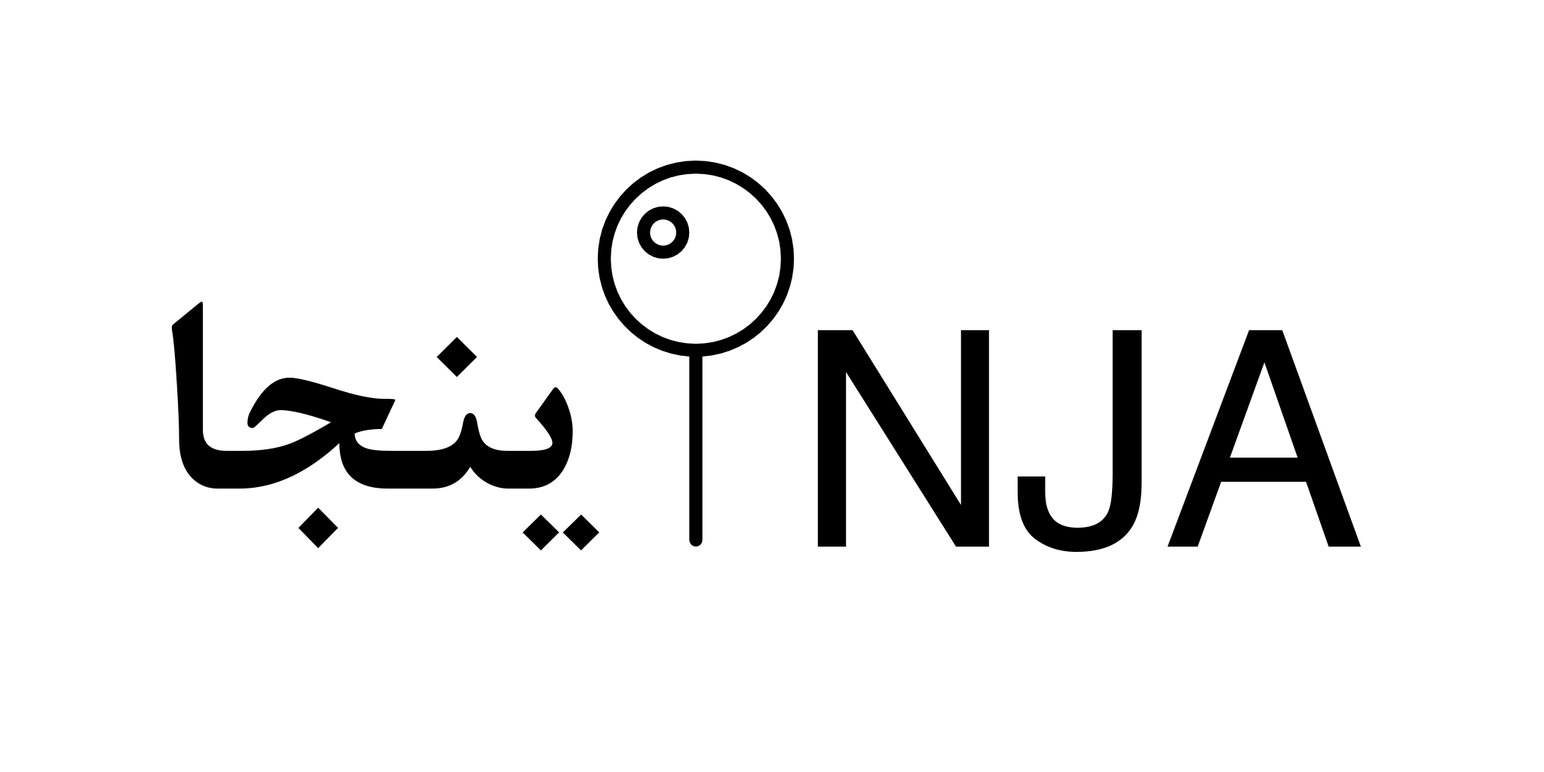
<style>
.page{position:relative;width:1544px;height:772px;background:#ffffff}
.page>*{position:absolute;margin:0}
.t1{font:301.6px "BNazaninBold";color:#000000}
.t2{font:301.6px "Helvetica";color:#000000}
</style>
<div class="page">
<p class="t1" style="left:171px;top:302px;width:428px;height:248px">ینجا</p>
<p class="t2" style="left:817px;top:330px;width:545px;height:222px">NJA</p>
</div>
